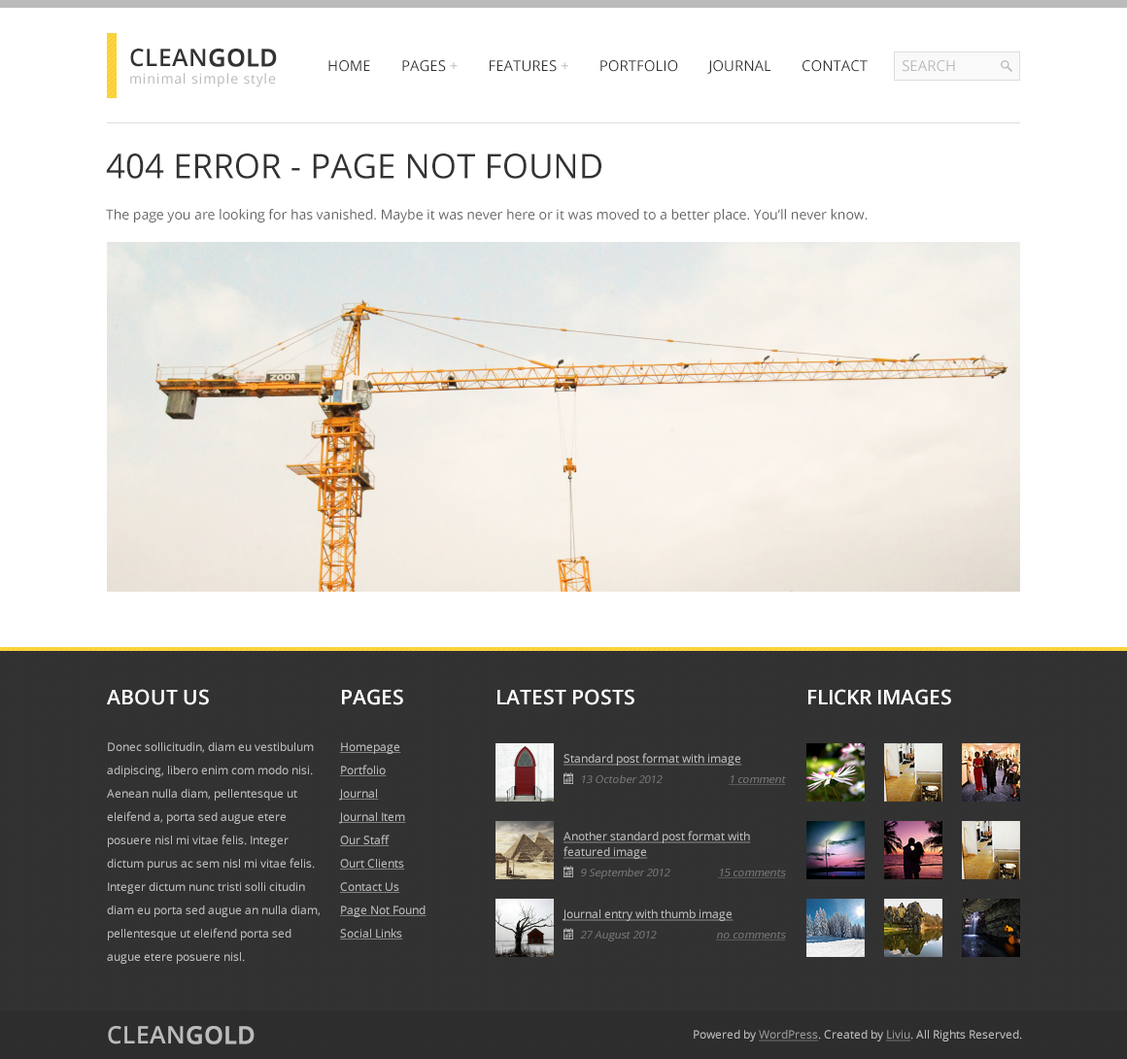
<style>
.page{position:relative;width:1127px;height:1059px;background:#ffffff}
.page>*{position:absolute;margin:0}
.t1{font:13.6px/17.5px "OpenSans";letter-spacing:0.045em;color:#bbbbbb}
.t2{font:24.3px/17.5px "OpenSans-Semibold";color:#333333;text-transform:uppercase}
.t3{font:24.3px/17.5px "OpenSans-Semibold";color:#333333;text-transform:uppercase;font-weight:bold}
.t4{font:14.6px "OpenSans";color:#333333;text-transform:uppercase}
.t5{font:14.6px "OpenSans";color:#bbbbbb;text-transform:uppercase}
.t6{font:34px "OpenSans";color:#333333;text-transform:uppercase}
.t7{font:13.6px "OpenSans";color:#666666}
.t8{font:11.7px/23.3px "OpenSans";color:#bbbbbb}
.t9{font:20.4px/23.3px "OpenSans-Semibold";color:#fefefe;text-transform:uppercase}
.t10{font:11.7px/23.3px "OpenSans";color:#bbbbbb;text-decoration:underline}
.t11{font:20.4px "OpenSans-Semibold";color:#fefefe;text-transform:uppercase}
.t12{font:11.7px "OpenSans";color:#bbbbbb;text-decoration:underline}
.t13{font:10.7px "OpenSans";color:#777777;font-style:italic}
.t14{font:10.7px "OpenSans";color:#777777;font-style:italic;text-decoration:underline}
.t15{font:11.7px/15.5px "OpenSans";color:#bbbbbb;text-decoration:underline}
.t16{font:24.3px "OpenSans-Semibold";color:#bbbbbb;text-transform:uppercase}
.t17{font:24.3px "OpenSans-Semibold";color:#bbbbbb;text-transform:uppercase;font-weight:bold}
.t18{font:11.7px "OpenSans";color:#bbbbbb}
.t19{font:11.7px "OpenSans";color:#999999;text-decoration:underline}
</style>
<div class="page">
<p class="t1" style="left:130px;top:49px;width:147px;height:38px"><span class="t2">Clean</span><span class="t3">Gold<br></span>minimal simple style</p>
<p class="t4" style="left:328px;top:60px;width:539px;height:14px">Home        Pages <span class="t5">+</span>        Features <span class="t5">+</span>        Portfolio        JOURNAL        Contact</p>
<p class="t5" style="left:902px;top:60px;width:53px;height:12px">Search</p>
<p class="t6" style="left:106px;top:153px;width:495px;height:26px">404 Error - Page not found</p>
<p class="t7" style="left:106px;top:209px;width:761px;height:13px">The page you are looking for has vanished. Maybe it was never here or it was moved to a better place. You’ll never know.</p>
<p class="t8" style="left:107px;top:689px;width:212px;height:274px"><span class="t9">About US<br><br></span>Donec sollicitudin, diam eu vestibulum adipiscing, libero enim com modo nisi. Aenean nulla diam, pellentesque ut eleifend a, porta sed augue etere posuere nisl mi vitae felis. Integer dictum purus ac sem nisl mi vitae felis. Integer dictum nunc tristi solli citudin diam eu porta sed augue an nulla diam, pellentesque ut eleifend porta sed augue etere posuere nisl.</p>
<p class="t10" style="left:339px;top:689px;width:87px;height:250px"><span class="t9">Pages<br><br></span>Homepage<br>Portfolio<br>Journal<br>Journal Item<br>Our Staff<br>Ourt Clients<br>Contact Us<br>Page Not Found<br>Social Links</p>
<p class="t11" style="left:497px;top:689px;width:137px;height:16px">Latest Posts</p>
<p class="t11" style="left:808px;top:689px;width:143px;height:16px">Flickr Images</p>
<p class="t12" style="left:563px;top:753px;width:179px;height:12px">Standard post format with image</p>
<p class="t13" style="left:582px;top:774px;width:80px;height:9px">13 October 2012</p>
<p class="t14" style="left:728px;top:775px;width:58px;height:10px">1 comment</p>
<p class="t15" style="left:563px;top:830px;width:188px;height:28px">Another standard post format with featured image</p>
<p class="t13" style="left:581px;top:867px;width:89px;height:12px">9 September 2012</p>
<p class="t14" style="left:718px;top:868px;width:68px;height:10px">15 comments</p>
<p class="t12" style="left:562px;top:909px;width:171px;height:12px">Journal entry with thumb image</p>
<p class="t13" style="left:580px;top:930px;width:76px;height:11px">27 August 2012</p>
<p class="t14" style="left:716px;top:930px;width:70px;height:10px">no comments</p>
<p class="t16" style="left:108px;top:1026px;width:146px;height:18px">Clean<span class="t17">Gold</span></p>
<p class="t18" style="left:693px;top:1029px;width:329px;height:12px">Powered by <span class="t19">WordPress</span>. Created by <span class="t19">Liviu</span>. All Rights Reserved.</p>
</div>
